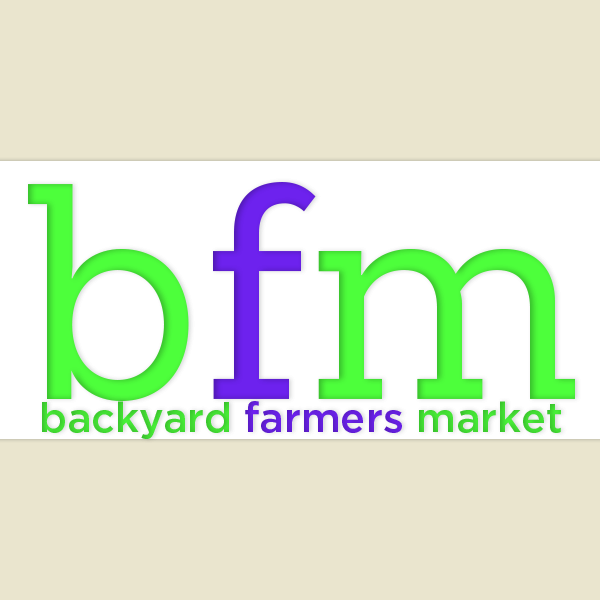
<style>
.page{position:relative;width:600px;height:600px;background:#eae5ce}
.page>*{position:absolute;margin:0}
.t1{font:300px "SanchezSlab";color:#4dff3b}
.t2{font:300px "SanchezSlab";color:#6d22ee}
.t3{font:41.7px "Gotham-Medium"}
</style>
<div class="page">
<p class="t1" style="left:28px;top:182px;width:547px;height:219px">b<span class="t2">f</span>m</p>
<p class="t3" style="left:42px;top:401px;width:519px;height:38px">backyard farmers market</p>
</div>
